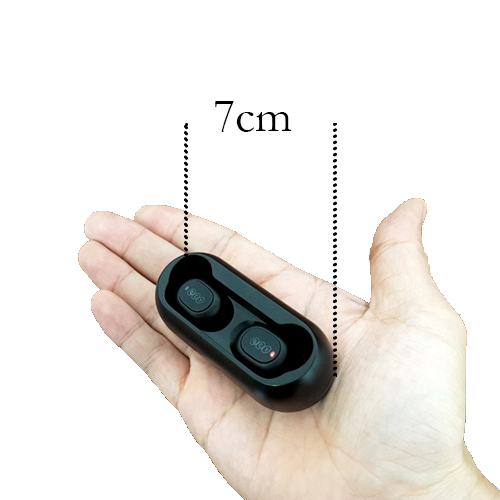
<style>
.page{position:relative;width:500px;height:500px;background:#ffffff}
.page>*{position:absolute;margin:0}
.t1{font:48.3px "Garamond";color:#000000}
</style>
<div class="page">
<p class="t1" style="left:215px;top:101px;width:77px;height:31px">7cm</p>
</div>
